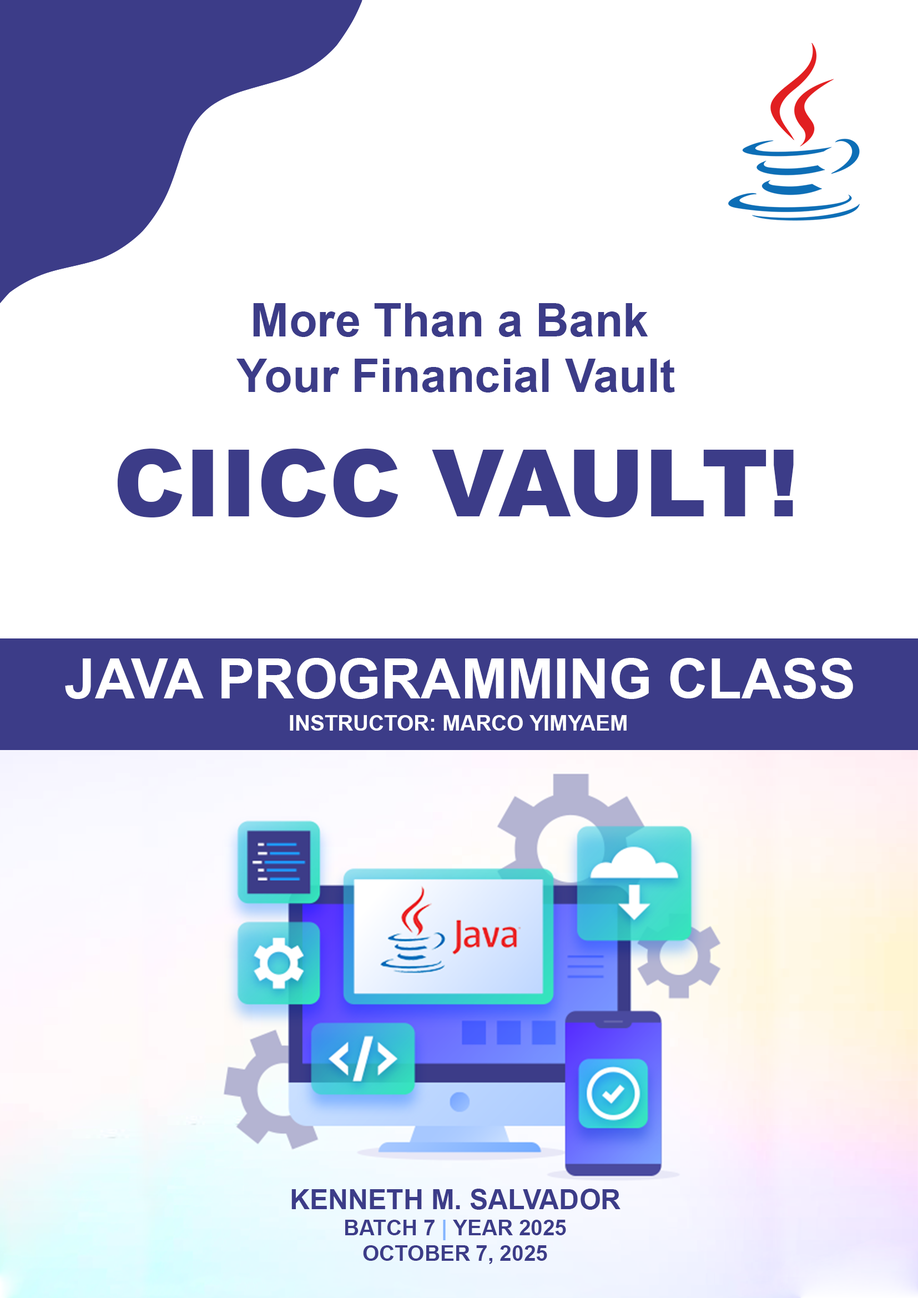
<style>
.page{position:relative;width:918px;height:1298px;background:#ffffff}
.page>*{position:absolute;margin:0}
.t1{font:46.3px "Arial-BoldMT";color:#3c3c88}
.t2{font:46.3px/79.6px "Arial-BoldMT";color:#3c3c88}
.t3{font:92.5px/124.4px "Arial-Black";color:#3c3c88}
.t4{font:55.5px "Arial-BoldMT";color:#ffffff}
.t5{font:21.6px "Arial-BoldMT";color:#ffffff;text-transform:uppercase}
.t6{font:21.6px "Arial-BoldMT";color:#3c3c88;text-transform:uppercase}
.t7{font:27.8px "Arial-BoldMT";color:#3c3c88;text-transform:uppercase}
.t8{font:21.6px "Arial-BoldMT";color:#82b4ff;text-transform:uppercase}
</style>
<div class="page">
<p class="t1" style="left:117px;top:303px;width:677px;height:215px;text-align:center"><span class="t2">More Than a Bank <br></span>Your Financial Vault<br><span class="t3">CIICC VAULT!</span></p>
<p class="t4" style="left:65px;top:658px;width:788px;height:41px">JAVA PROGRAMMING CLASS</p>
<p class="t5" style="left:290px;top:715px;width:337px;height:16px">INSTRUCTOR: MARCO YIMYAeM</p>
<p class="t6" style="left:292px;top:1189px;width:329px;height:75px;text-align:center"><span class="t7">Kenneth M. Salvador<br></span>Batch 7 <span class="t8">|</span> YEAR 2025<br>October 7, 2025</p>
</div>
